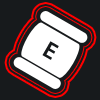
<style>
.page{position:relative;width:100px;height:100px;background:#171a1c}
.page>*{position:absolute;margin:0}
.t1{font:25px "Consolas-Bold";color:#171a1c}
</style>
<div class="page">
<p class="t1" style="left:42px;top:41px;width:17px;height:19px;rotate:30deg">E</p>
</div>
